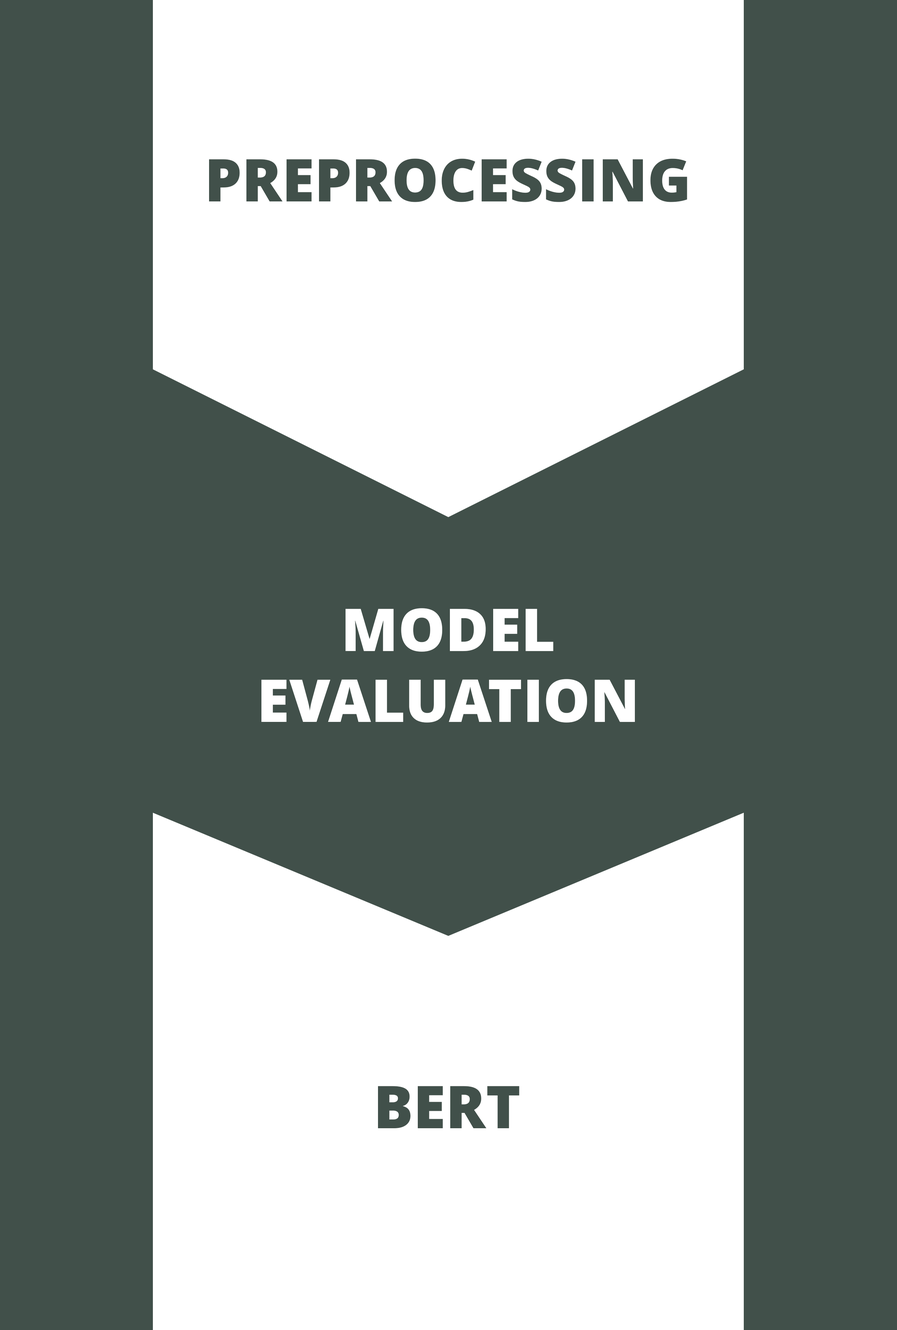
<style>
.page{position:relative;width:897px;height:1330px;background:#41504a}
.page>*{position:absolute;margin:0}
.t1{font:59.1px "OpenSans-Extrabold";color:#41504a}
.t2{font:59.1px "OpenSans-Extrabold";color:#ffffff}
</style>
<div class="page">
<p class="t1" style="left:209px;top:158px;width:478px;height:44px">PREPROCESSING</p>
<p class="t2" style="left:261px;top:608px;width:374px;height:114px;text-align:center">MODEL<br>EVALUATION</p>
<p class="t1" style="left:378px;top:1086px;width:141px;height:42px">BERT</p>
</div>
